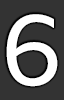
<style>
.page{position:relative;width:64px;height:100px;background:#333333}
.page>*{position:absolute;margin:0}
.t1{font:100px "Amiko-Regular";color:#ffffff}
</style>
<div class="page">
<p class="t1" style="left:6px;top:14px;width:52px;height:73px">6</p>
</div>
